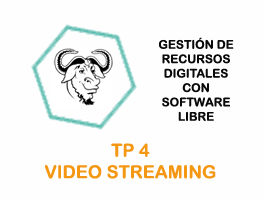
<style>
.page{position:relative;width:264px;height:200px;background:#fefefe}
.page>*{position:absolute;margin:0}
.t1{font:12px "ArialRoundedMTBold";color:#0a0a0a;text-transform:uppercase}
.t2{font:18px "ArialRoundedMTBold";color:#f49713;text-transform:uppercase}
</style>
<div class="page">
<p class="t1" style="left:158px;top:37px;width:76px;height:84px;text-align:center">GESTIÓN DE<br>RECURSOS<br>DIGITALES <br>CON <br>SOFTWARE <br>LIBRE</p>
<p class="t2" style="left:45px;top:143px;width:171px;height:36px;text-align:center">TP 4<br>VIDEO STREAMING</p>
</div>
